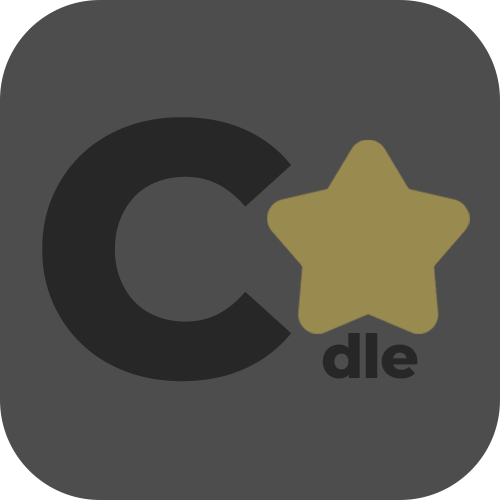
<style>
.page{position:relative;width:500px;height:500px;background:#4d4d4d}
.page>*{position:absolute;margin:0}
.t1{font:362.3px "Montserrat-ExtraBold";letter-spacing:-0.025em;color:#272727}
.t2{font:60.8px "Montserrat-ExtraBold";letter-spacing:-0.025em;color:#272727}
</style>
<div class="page">
<p class="t1" style="left:42px;top:117px;width:249px;height:265px">C</p>
<p class="t2" style="left:322px;top:333px;width:96px;height:46px">dle</p>
</div>
